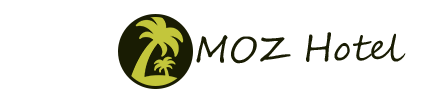
<style>
.page{position:relative;width:424px;height:96px;background:#ffffff}
.page>*{position:absolute;margin:0}
.t1{font:36px "SegoeScript";color:#191c03}
</style>
<div class="page">
<p class="t1" style="left:196px;top:32px;width:210px;height:32px">MOZ Hotel</p>
</div>
